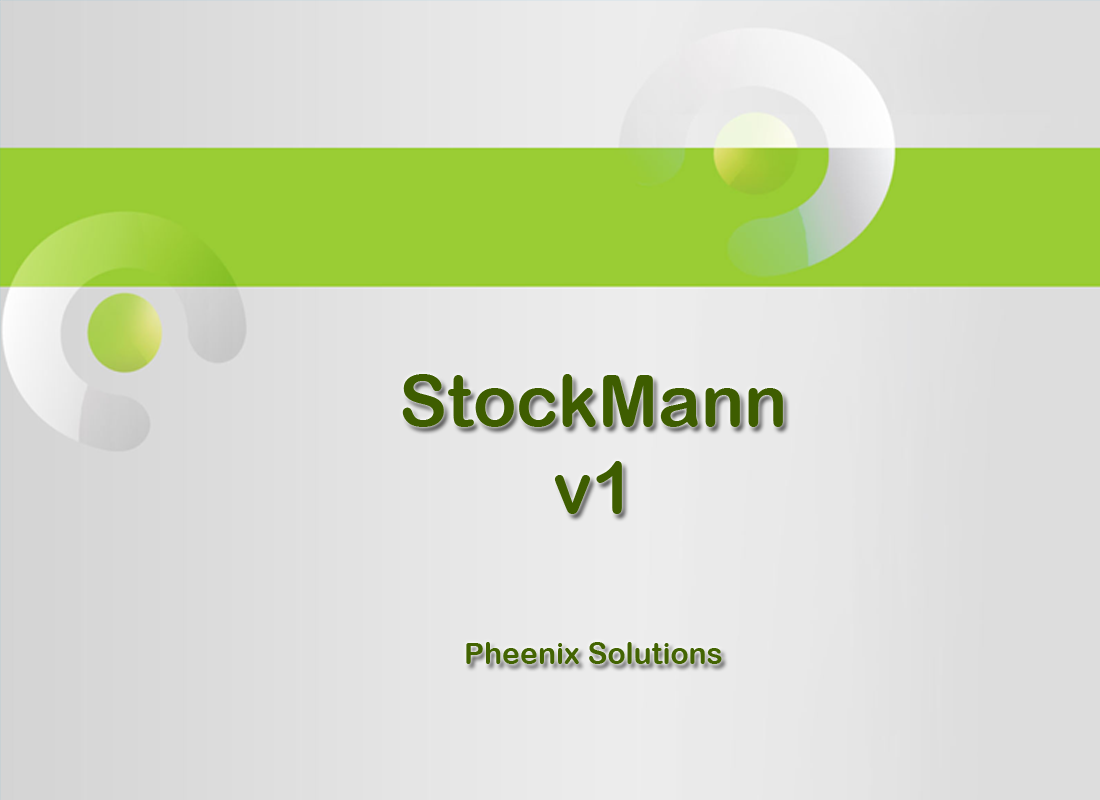
<style>
.page{position:relative;width:1100px;height:800px}
.page>*{position:absolute;margin:0}
.t1{font:30px "ArialRoundedMTBold";color:#436402}
.t2{font:72px "ArialRoundedMTBold";color:#3e5d00}
</style>
<div class="page">
<p class="t1" style="left:402px;top:374px;width:381px;height:290px;text-align:center"><span class="t2">StockMann<br>v1<br><br><br></span>Pheenix Solutions</p>
</div>
